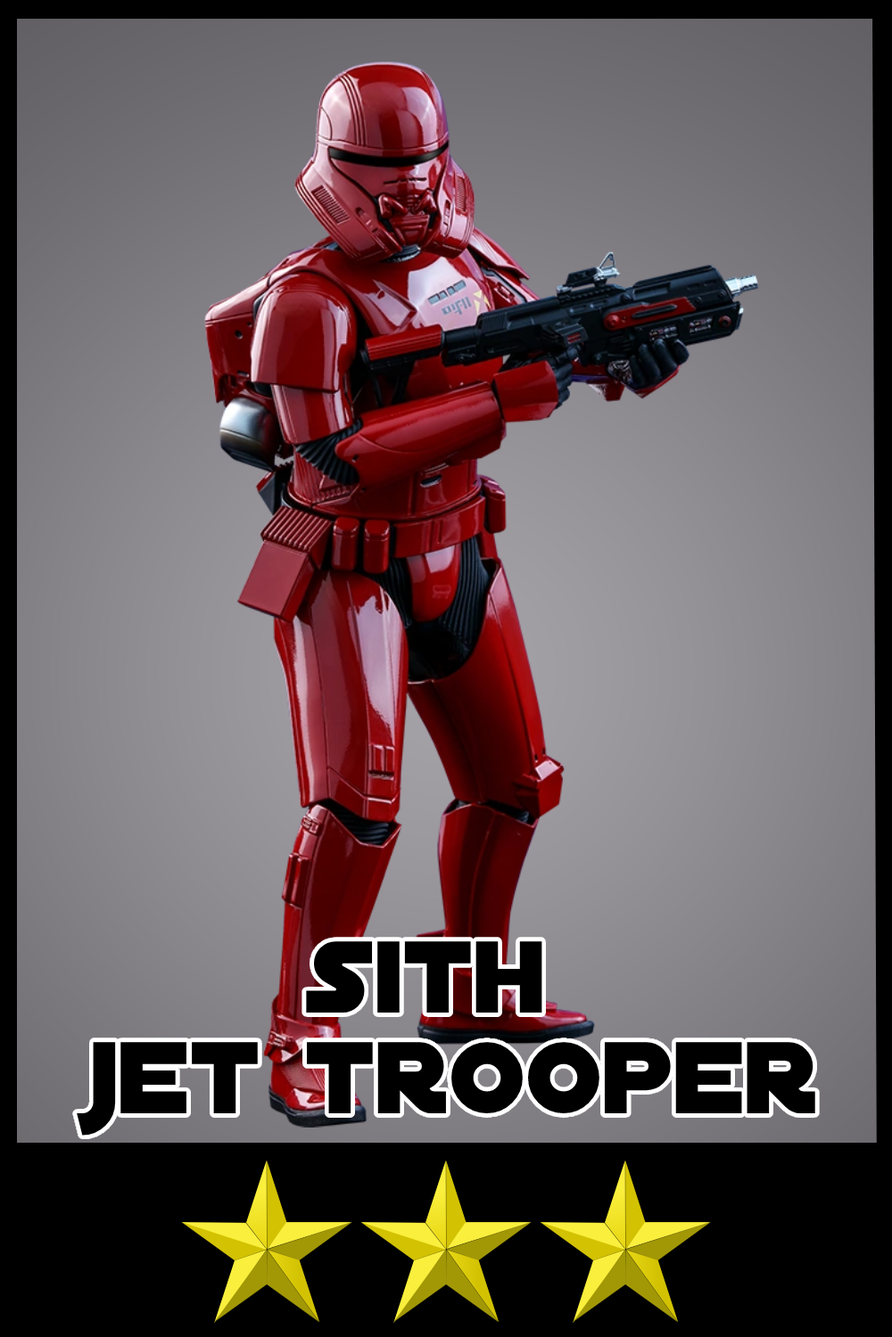
<style>
.page{position:relative;width:892px;height:1337px}
.page>*{position:absolute;margin:0}
.t1{font:109.5px/100.4px "DistantGalaxy";color:#000000}
</style>
<div class="page">
<p class="t1" style="left:77px;top:942px;width:738px;height:194px;text-align:center">sith <br>jet trooper</p>
</div>
